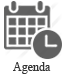
<style>
.page{position:relative;width:64px;height:74px;background:#ffffff}
.page>*{position:absolute;margin:0}
.t1{font:12px "TimesNewRomanPSMT";color:#333333}
</style>
<div class="page">
<p class="t1" style="left:13px;top:62px;width:38px;height:12px">Agenda</p>
</div>
